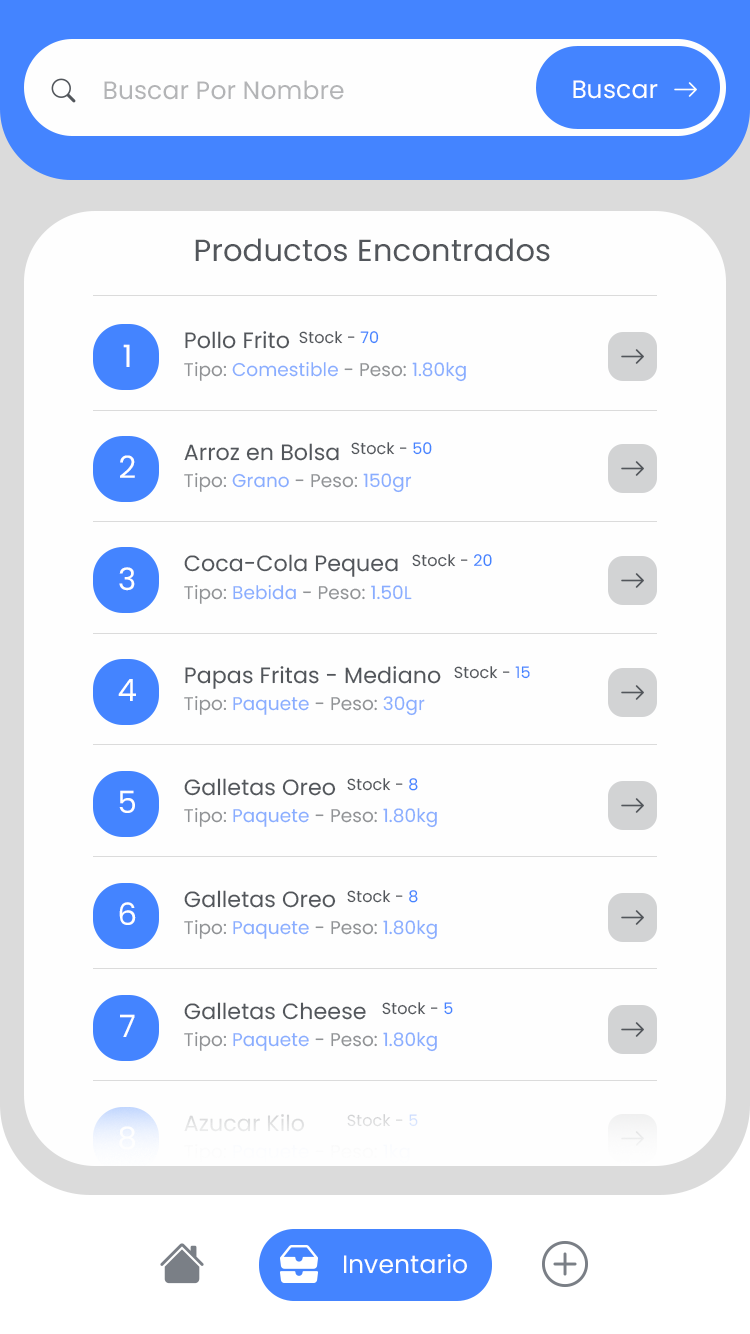
<style>
.page{position:relative;width:750px;height:1334px;background:#fefefe}
.page>*{position:absolute;margin:0}
.t1{font:25px "Poppins-Regular";letter-spacing:0.005em;color:#b3b4b6}
.t2{font:25px "Poppins-Regular";letter-spacing:0.005em;color:#ffffff}
.t3{font:30.6px "Poppins-Regular";letter-spacing:0.005em;color:#52565b}
.t4{font:30.6px "Poppins-Regular";letter-spacing:0.005em;color:#52565b;text-transform:uppercase}
.t5{font:22.1px "Poppins-Regular";letter-spacing:0.005em;color:#52565b}
.t6{font:22.1px "Poppins-Regular";letter-spacing:0.005em;color:#52565b;text-transform:uppercase}
.t7{font:16px "Poppins-Regular";letter-spacing:0.005em;color:#52565b}
.t8{font:16px "Poppins-Regular";letter-spacing:0.005em;color:#52565b;text-transform:uppercase}
.t9{font:16px "Poppins-Regular";letter-spacing:0.005em;color:#4484ff}
.t10{font:30.7px "Poppins-Regular";letter-spacing:0.005em;color:#ffffff;text-transform:uppercase}
.t11{font:18.4px "Poppins-Regular";letter-spacing:0.005em}
.t12{font:22.1px "Poppins-Regular";letter-spacing:0.005em;color:#e2e3e4}
.t13{font:16px "Poppins-Regular";letter-spacing:0.005em;color:#d8dcde}
.t14{font:16px "Poppins-Regular";letter-spacing:0.005em;color:#d8dcde;text-transform:uppercase}
.t15{font:25px "Poppins-Regular";letter-spacing:0.005em;color:#fefefe}
</style>
<div class="page">
<p class="t1" style="left:104px;top:80px;width:240px;height:20px">Buscar Por Nombre</p>
<p class="t2" style="left:573px;top:80px;width:85px;height:19px">Buscar</p>
<p class="t3" style="left:195px;top:238px;width:355px;height:24px"><span class="t4">P</span>roductos Encontrados</p>
<p class="t5" style="left:185px;top:331px;width:105px;height:18px"><span class="t6">p</span>ollo Frito</p>
<p class="t7" style="left:299px;top:331px;width:80px;height:13px"><span class="t8">S</span>tock - <span class="t9">70</span></p>
<p class="t10" style="left:123px;top:344px;width:7px;height:23px">1</p>
<p class="t11" style="left:184px;top:361px;width:282px;height:21px">Tipo: Comestible - Peso: 1.80kg</p>
<p class="t5" style="left:184px;top:443px;width:155px;height:18px">Arroz en Bolsa</p>
<p class="t7" style="left:351px;top:442px;width:81px;height:13px"><span class="t8">S</span>tock - <span class="t9">50</span></p>
<p class="t10" style="left:120px;top:455px;width:15px;height:23px">2</p>
<p class="t11" style="left:184px;top:473px;width:228px;height:20px">Tipo: Grano - Peso: 150gr</p>
<p class="t5" style="left:184px;top:554px;width:214px;height:23px">Coca-Cola Pequea</p>
<p class="t7" style="left:412px;top:554px;width:80px;height:13px"><span class="t8">S</span>tock - <span class="t9">20</span></p>
<p class="t10" style="left:119px;top:567px;width:16px;height:24px">3</p>
<p class="t11" style="left:184px;top:585px;width:228px;height:19px">Tipo: Bebida - Peso: 1.50L</p>
<p class="t5" style="left:185px;top:666px;width:256px;height:23px">Papas Fritas - Mediano</p>
<p class="t7" style="left:454px;top:666px;width:76px;height:13px"><span class="t8">S</span>tock - <span class="t9">15</span></p>
<p class="t10" style="left:118px;top:679px;width:18px;height:22px">4</p>
<p class="t11" style="left:184px;top:696px;width:241px;height:20px">Tipo: Paquete - Peso: 30gr</p>
<p class="t5" style="left:184px;top:778px;width:152px;height:18px">Galletas Oreo</p>
<p class="t7" style="left:347px;top:778px;width:71px;height:13px"><span class="t8">S</span>tock - <span class="t9">8</span></p>
<p class="t10" style="left:119px;top:790px;width:16px;height:23px">5</p>
<p class="t11" style="left:184px;top:808px;width:253px;height:20px">Tipo: Paquete - Peso: 1.80kg</p>
<p class="t5" style="left:184px;top:890px;width:152px;height:18px">Galletas Oreo</p>
<p class="t7" style="left:347px;top:890px;width:71px;height:13px"><span class="t8">S</span>tock - <span class="t9">8</span></p>
<p class="t10" style="left:119px;top:902px;width:17px;height:23px">6</p>
<p class="t11" style="left:184px;top:920px;width:253px;height:20px">Tipo: Paquete - Peso: 1.80kg</p>
<p class="t10" style="left:120px;top:1014px;width:15px;height:23px">7</p>
<p class="t5" style="left:184px;top:1002px;width:182px;height:18px">Galletas Cheese</p>
<p class="t7" style="left:382px;top:1002px;width:71px;height:13px"><span class="t8">S</span>tock - <span class="t9">5</span></p>
<p class="t11" style="left:184px;top:1032px;width:253px;height:20px">Tipo: Paquete - Peso: 1.80kg</p>
<p class="t12" style="left:184px;top:1114px;width:121px;height:18px">Azucar Kilo</p>
<p class="t13" style="left:347px;top:1114px;width:71px;height:13px"><span class="t14">S</span>tock - 5</p>
<p class="t10" style="left:119px;top:1126px;width:16px;height:24px">8</p>
<p class="t15" style="left:344px;top:1254px;width:123px;height:20px">Inventario</p>
</div>
